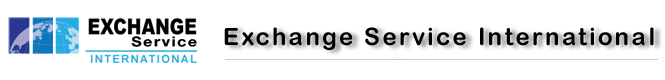
<style>
.page{position:relative;width:665px;height:80px;background:#ffffff}
.page>*{position:absolute;margin:0}
.t1{font:24px "ArialRoundedMTBold";letter-spacing:0.1em;color:#000000}
</style>
<div class="page">
<p class="t1" style="left:224px;top:27px;width:430px;height:23px">Exchange Service International</p>
</div>
